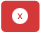
<style>
.page{position:relative;width:41px;height:34px;background:#d43838}
.page>*{position:absolute;margin:0}
.t1{font:10px "Tahoma"}
</style>
<div class="page">
<p class="t1" style="left:17px;top:13px;width:6px;height:6px">x</p>
</div>
